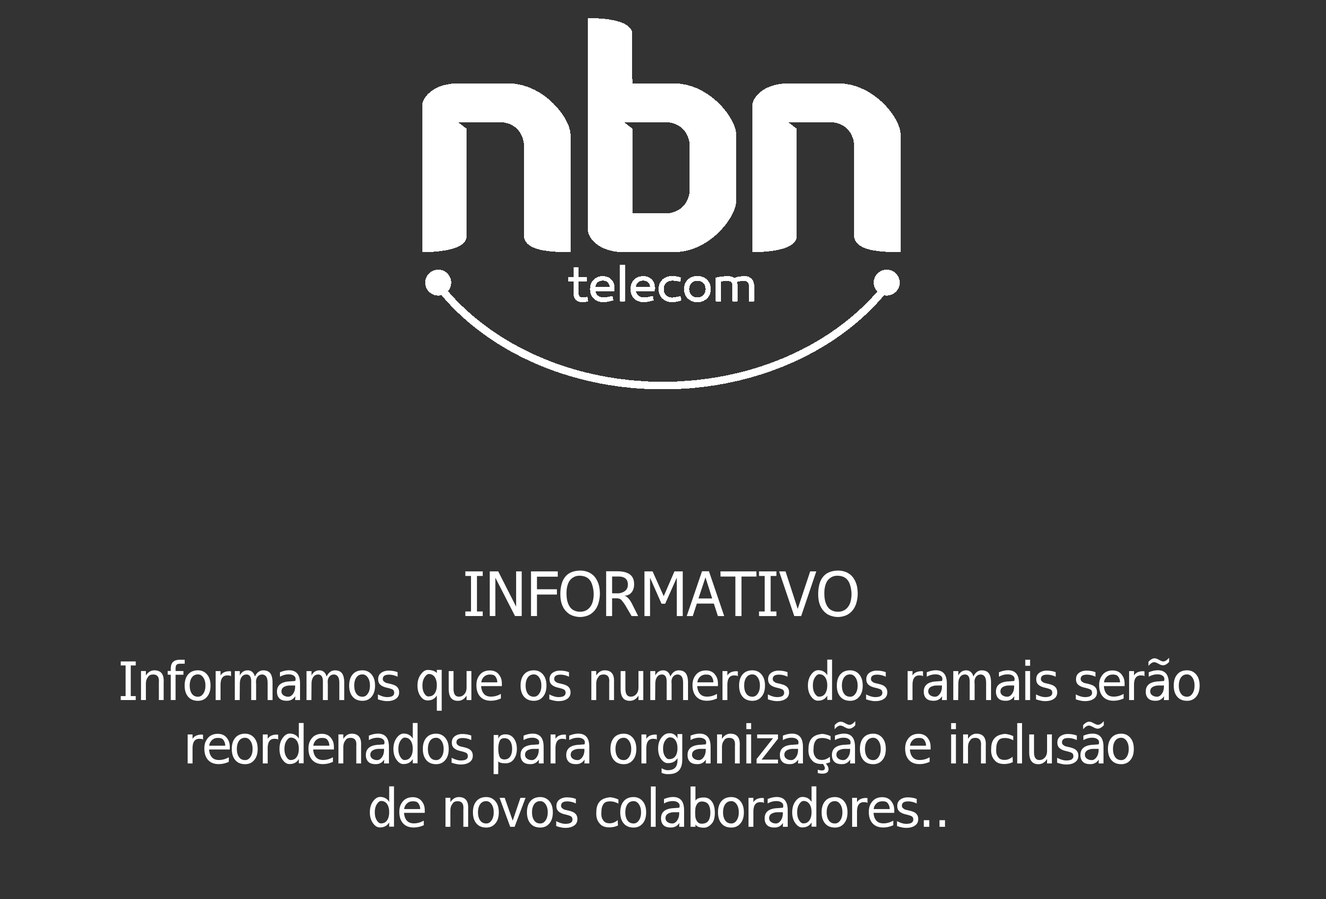
<style>
.page{position:relative;width:1326px;height:899px;background:#333333}
.page>*{position:absolute;margin:0}
.t1{font:61.4px "Tahoma";color:#ffffff}
.t2{font:52.9px "Tahoma";color:#ffffff}
</style>
<div class="page">
<p class="t1" style="left:465px;top:570px;width:393px;height:47px">INFORMATIVO</p>
<p class="t2" style="left:120px;top:657px;width:1080px;height:171px;text-align:center">Informamos que os numeros dos ramais serão<br>reordenados para organização e inclusão<br>de novos colaboradores..</p>
</div>
